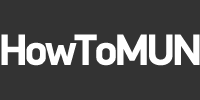
<style>
.page{position:relative;width:200px;height:100px;background:#333333}
.page>*{position:absolute;margin:0}
.t1{font:43.9px "PFDinDisplayPro-Bold";letter-spacing:-0.06em;color:#ffffff}
</style>
<div class="page">
<p class="t1" style="left:1px;top:34px;width:199px;height:32px">HowToMUN</p>
</div>
